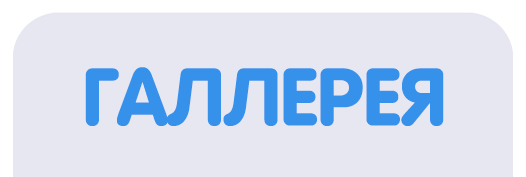
<style>
.page{position:relative;width:526px;height:177px;background:#e7e7f2}
.page>*{position:absolute;margin:0}
.t1{font:80px "VAGWorld-Bold";color:#3691eb}
</style>
<div class="page">
<p class="t1" style="left:85px;top:67px;width:359px;height:59px">ГАЛЛЕРЕЯ</p>
</div>
